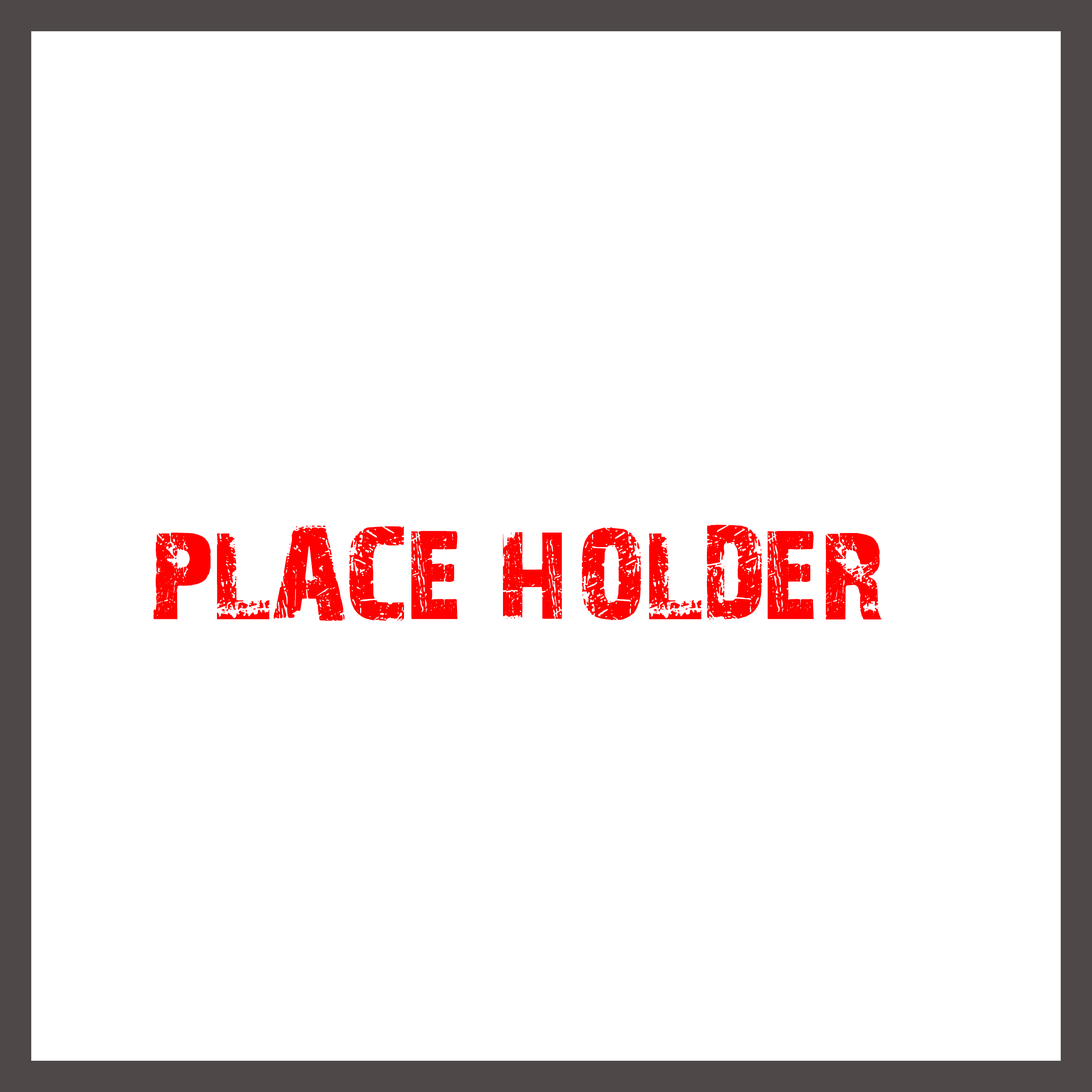
<style>
.page{position:relative;width:1092px;height:1092px;background:#ffffff}
.page>*{position:absolute;margin:0}
.t1{font:123.3px "28DaysLater";color:#ff0000;text-transform:uppercase}
</style>
<div class="page">
<p class="t1" style="left:153px;top:524px;width:729px;height:97px">place holder</p>
</div>
